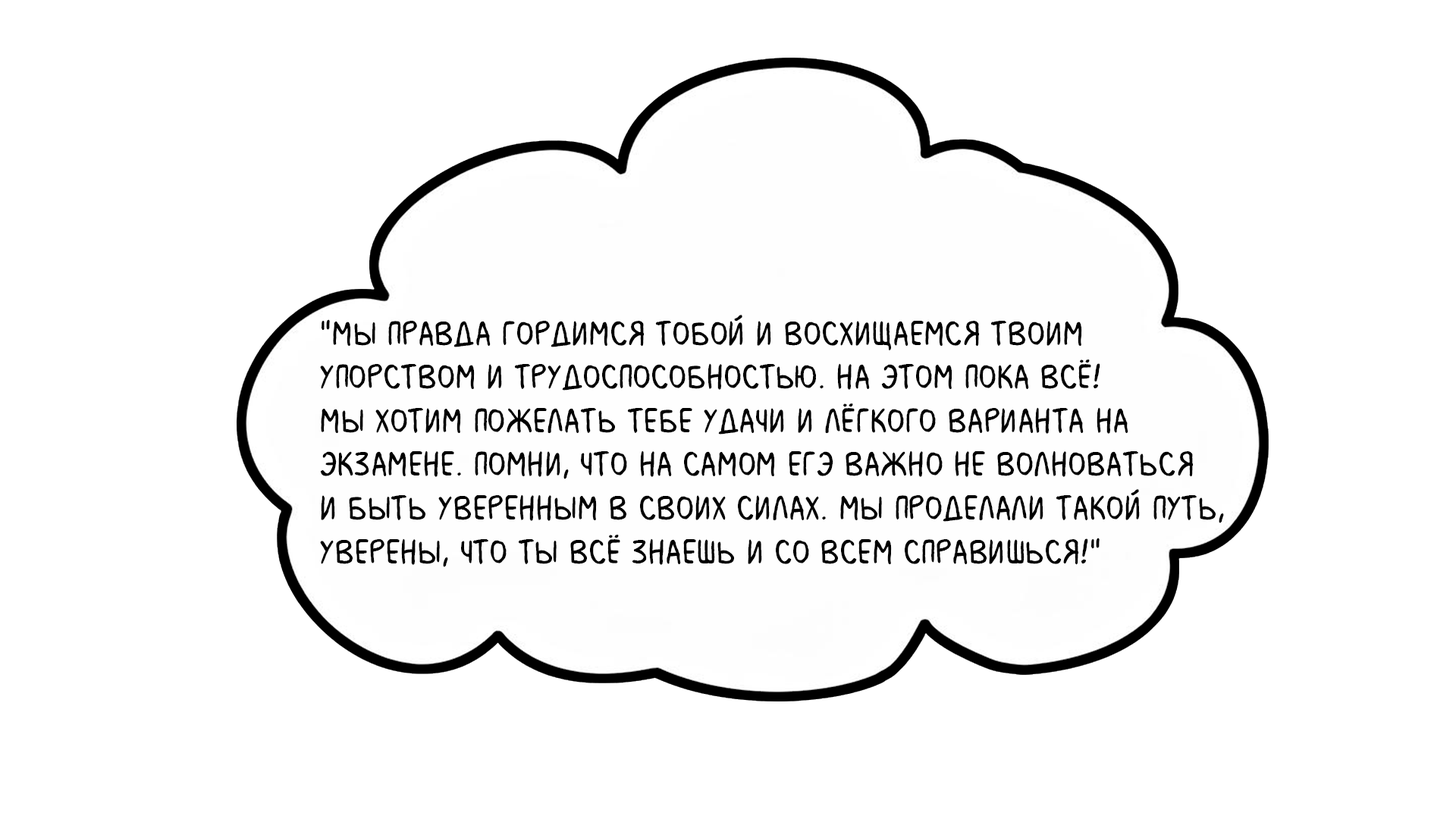
<style>
.page{position:relative;width:1456px;height:819px;background:#ffffff}
.page>*{position:absolute;margin:0}
.t1{font:36.4px "MilkMustacheBB";color:#000000}
</style>
<div class="page">
<p class="t1" style="left:320px;top:315px;width:904px;height:252px">"Мы правда гордимся тобой и восхищаемся твоим <br>упорством и трудоспособностью. На этом пока всё! <br>Мы хотим пожелать тебе удачи и лёгкого варианта на <br>экзамене. Помни, что на самом ЕГЭ важно не волноваться <br>и быть уверенным в своих силах. Мы проделали такой путь, <br>уверены, что ты всё знаешь и со всем справишься!"</p>
</div>
